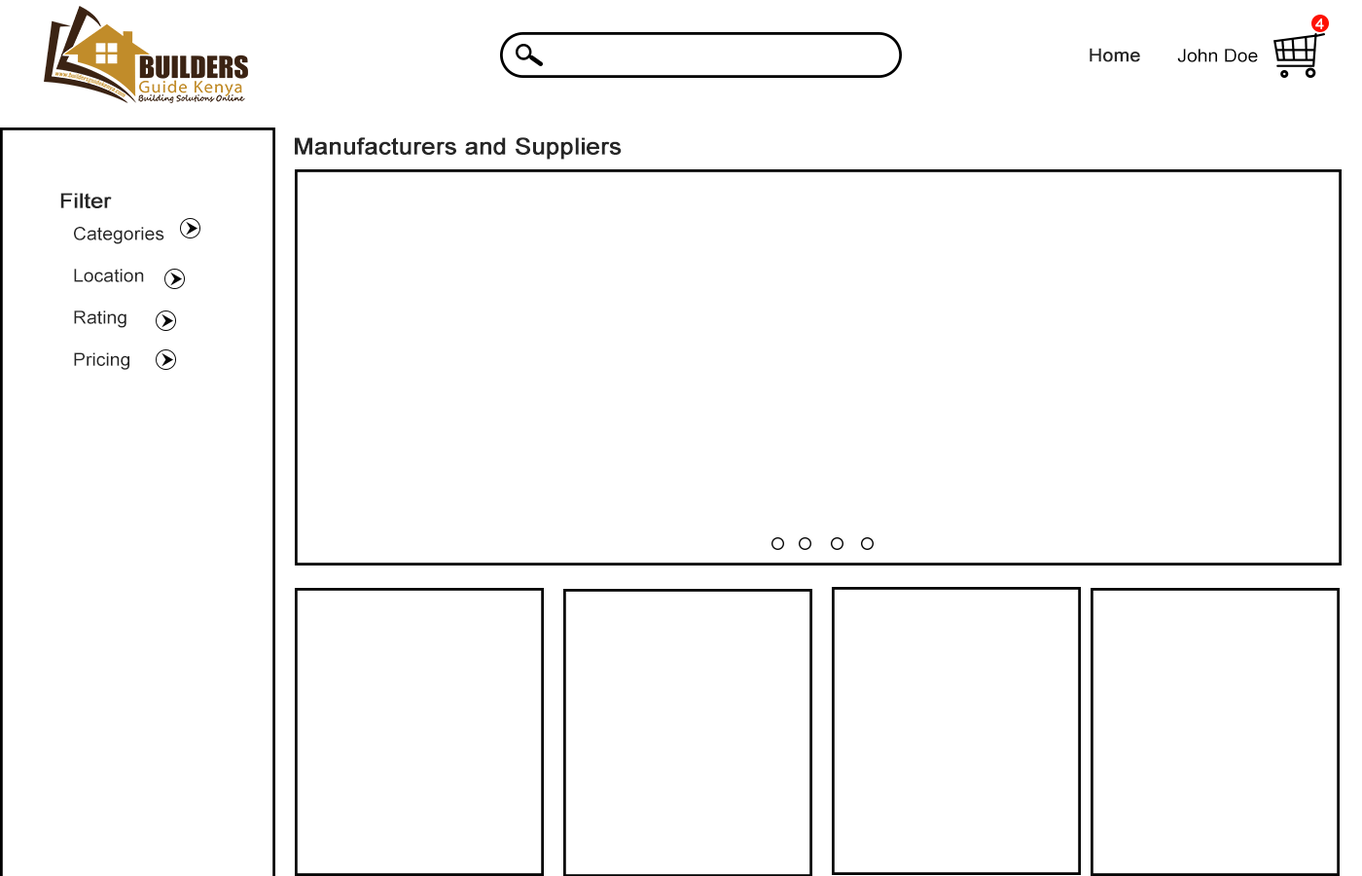
<style>
.page{position:relative;width:1362px;height:876px;background:#ffffff}
.page>*{position:absolute;margin:0}
.t1{font:15.2px "ArialMT";color:#ffffff;scale:1.06 1}
.t2{font:17.8px "ArialMT";color:#262626;font-weight:bold;scale:1.06 1}
.t3{font:17.8px "ArialMT";color:#000000;scale:1.06 1}
.t4{font:22.9px "ArialMT";color:#262626;font-weight:bold;scale:1.06 1}
.t5{font:20.3px "ArialMT";color:#262626;font-weight:bold;scale:1.06 1}
.t6{font:17.8px/41.9px "ArialMT";color:#262626;scale:1.06 1}
</style>
<div class="page">
<p class="t1" style="left:1315px;top:18px;width:9px;height:11px">4</p>
<p class="t2" style="left:1090px;top:48px;width:50px;height:14px">Home</p>
<p class="t3" style="left:1177px;top:49px;width:81px;height:13px">John Doe</p>
<p class="t4" style="left:295px;top:137px;width:327px;height:23px">Manufacturers and Suppliers</p>
<p class="t5" style="left:60px;top:193px;width:52px;height:15px">Filter</p>
<p class="t6" style="left:74px;top:227px;width:90px;height:143px">Categories<br>Location<br>Rating<br>Pricing</p>
</div>
